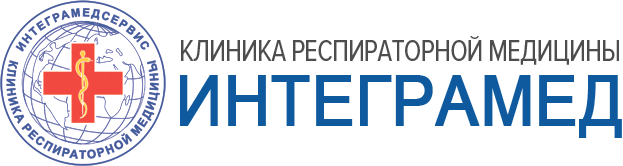
<style>
.page{position:relative;width:623px;height:166px;background:#ffffff}
.page>*{position:absolute;margin:0}
.t1{font:31px "ProximaNovaCond-Regular";letter-spacing:-0.03em;color:#4d4d4d;scale:0.95 1}
.t2{font:70px "ArialMT";color:#0f5a9e;font-weight:bold;scale:0.91 1}
</style>
<div class="page">
<p class="t1" style="left:181px;top:35px;width:438px;height:30px">КЛИНИКА РЕСПИРАТОРНОЙ МЕДИЦИНЫ</p>
<p class="t2" style="left:180px;top:75px;width:442px;height:63px">ИНТЕГРАМЕД</p>
</div>
